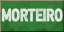
<style>
.page{position:relative;width:64px;height:32px}
.page>*{position:absolute;margin:0}
.t1{font:18px "DINNextLTPro-Bold";letter-spacing:-0.05em;color:#d3d3d2;font-weight:bold;scale:0.76 1}
</style>
<div class="page">
<p class="t1" style="left:1px;top:8px;width:62px;height:14px">MORTEIRO</p>
</div>
